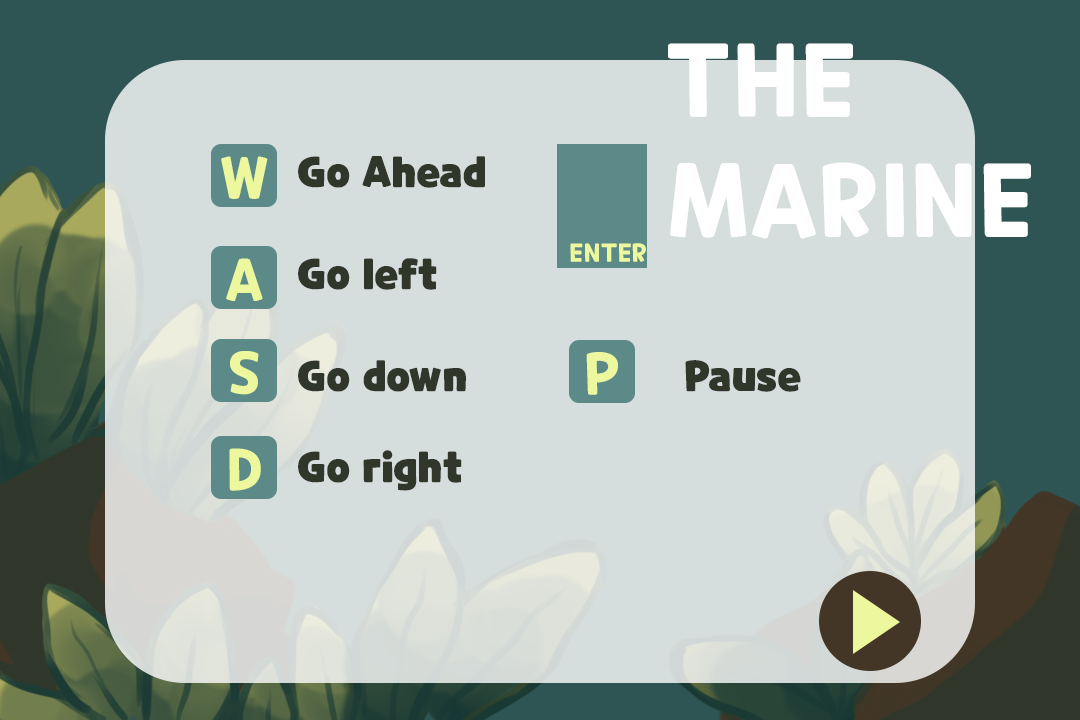
<style>
.page{position:relative;width:1080px;height:720px;background:#d5dddd}
.page>*{position:absolute;margin:0}
.t1{font:57.5px "CookieRun-Bold";color:#edf89e}
.t2{font:41.7px "CookieRun-Black";color:#30362a}
.t3{font:25px "CookieRun-Bold";color:#edf89e}
</style>
<div class="page">
<p class="t1" style="left:221px;top:156px;width:47px;height:43px">W</p>
<p class="t2" style="left:298px;top:156px;width:187px;height:32px">Go Ahead</p>
<p class="t3" style="left:570px;top:243px;width:76px;height:19px">ENTER</p>
<p class="t1" style="left:226px;top:258px;width:37px;height:43px">A</p>
<p class="t2" style="left:298px;top:258px;width:139px;height:32px">Go left</p>
<p class="t1" style="left:230px;top:351px;width:29px;height:44px">S</p>
<p class="t1" style="left:586px;top:352px;width:32px;height:43px">P</p>
<p class="t2" style="left:298px;top:360px;width:168px;height:32px">Go down</p>
<p class="t2" style="left:685px;top:360px;width:116px;height:32px">Pause</p>
<p class="t1" style="left:229px;top:448px;width:32px;height:43px">D</p>
<p class="t2" style="left:298px;top:450px;width:164px;height:41px">Go right</p>
</div>
